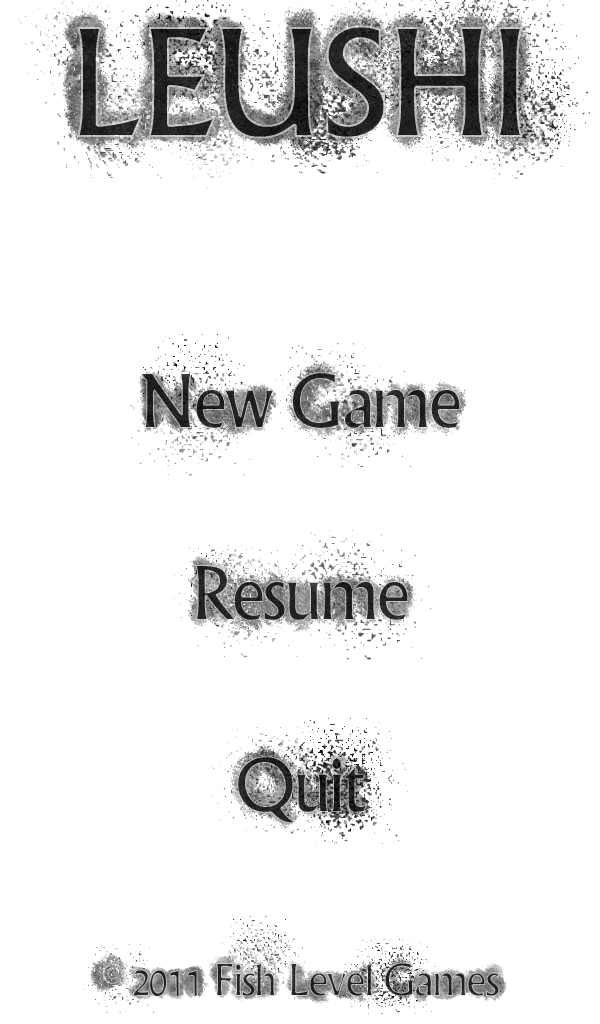
<style>
.page{position:relative;width:600px;height:1024px;background:#ffffff}
.page>*{position:absolute;margin:0}
.t1{font:160px "Narkisim";letter-spacing:-0.045em;color:#232323}
.t2{font:80px "Narkisim";letter-spacing:-0.045em}
.t3{font:48px "Narkisim";letter-spacing:-0.045em}
</style>
<div class="page">
<p class="t1" style="left:77px;top:25px;width:446px;height:114px">LEUSHI</p>
<p class="t2" style="left:139px;top:372px;width:322px;height:452px;text-align:center">New Game<br><br>Resume<br><br>Quit</p>
<p class="t3" style="left:102px;top:962px;width:398px;height:36px">© 2011 Fish Level Games</p>
</div>
